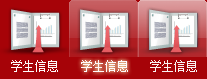
<style>
.page{position:relative;width:207px;height:79px;background:#a60308}
.page>*{position:absolute;margin:0}
.t1{font:12px "NSimSun";color:#fdfafa}
</style>
<div class="page">
<p class="t1" style="left:11px;top:60px;width:47px;height:12px">学生信息</p>
<p class="t1" style="left:81px;top:60px;width:47px;height:12px">学生信息</p>
<p class="t1" style="left:150px;top:60px;width:47px;height:12px">学生信息</p>
</div>
